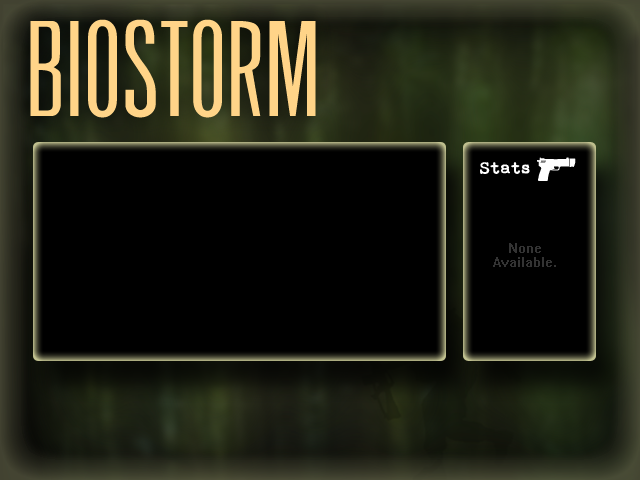
<style>
.page{position:relative;width:640px;height:480px;background:#000000}
.page>*{position:absolute;margin:0}
.t1{font:47.8px "HalfLife2";color:#ffffff}
.t2{font:16.8px "Bohemian-typewriter";color:#ffffff;font-weight:bold}
.t3{font:12px "System";color:#333333}
</style>
<div class="page">
<p class="t1" style="left:537px;top:157px;width:39px;height:24px">%</p>
<p class="t2" style="left:480px;top:162px;width:50px;height:12px">Stats</p>
<p class="t3" style="left:493px;top:243px;width:63px;height:24px;text-align:center">None <br>Available.</p>
</div>
